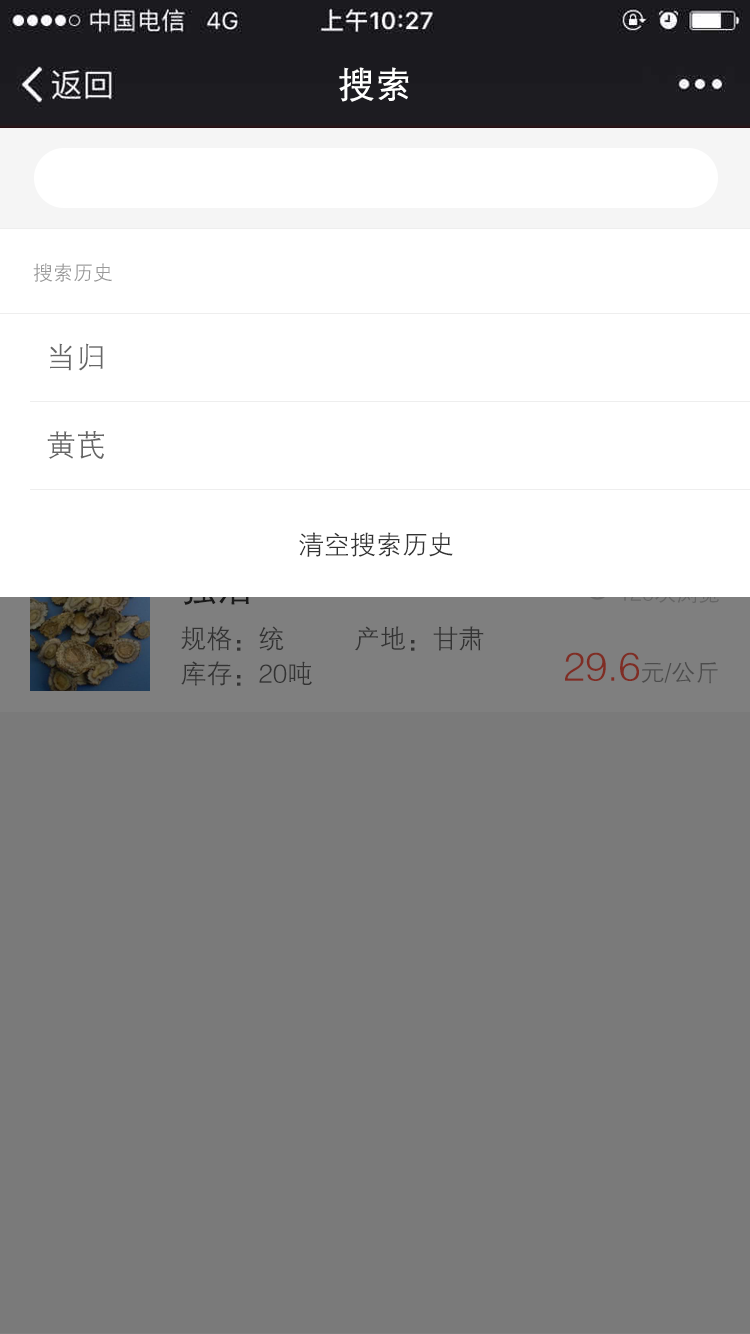
<style>
.page{position:relative;width:750px;height:1334px;background:#7a7a7a}
.page>*{position:absolute;margin:0}
.t1{font:36px "FZZDXJW--GB1-0";color:#ffffff;font-weight:bold}
.t2{font:20px "FZZDXJW--GB1-0";color:#999999}
.t3{font:30px "FZZDXJW--GB1-0";color:#666666}
.t4{font:26px "FZZDXJW--GB1-0";color:#333333}
.t5{font:40px "FZZDXJW--GB1-0";color:#7f2d24}
.t6{font:24px "FZZDXJW--GB1-0";color:#7f2d24}
</style>
<div class="page">
<p class="t1" style="left:339px;top:67px;width:70px;height:35px">搜索</p>
<p class="t2" style="left:33px;top:263px;width:79px;height:19px">搜索历史</p>
<p class="t3" style="left:50px;top:343px;width:53px;height:28px">当归</p>
<p class="t3" style="left:47px;top:431px;width:57px;height:28px">黄芪</p>
<p class="t4" style="left:299px;top:532px;width:154px;height:25px">清空搜索历史</p>
<p class="t4" style="left:181px;top:626px;width:103px;height:25px">规格：统</p>
<p class="t4" style="left:355px;top:626px;width:129px;height:25px">产地：甘肃</p>
<p class="t5" style="left:565px;top:652px;width:153px;height:32px">29.6<span class="t6">元/公斤</span></p>
<p class="t4" style="left:181px;top:661px;width:131px;height:25px">库存：20吨</p>
</div>
